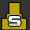
<style>
.page{position:relative;width:30px;height:30px;background:#333333}
.page>*{position:absolute;margin:0}
.t1{font:14px "Coalition";color:#ffffff}
</style>
<div class="page">
<p class="t1" style="left:8px;top:16px;width:13px;height:10px">S</p>
</div>
